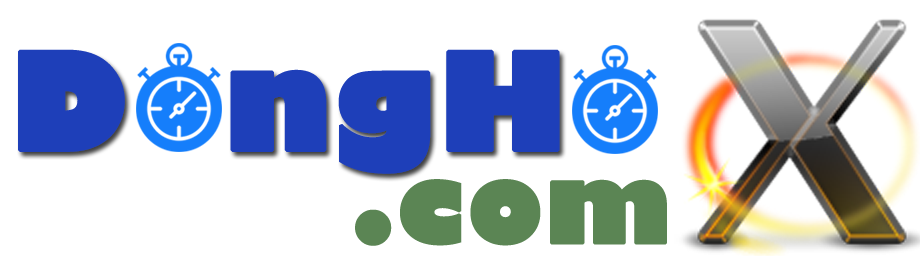
<style>
.page{position:relative;width:920px;height:256px;background:#ffffff}
.page>*{position:absolute;margin:0}
.t1{font:132px "GillSans-UltraBold";color:#1e3fb9;font-weight:bold}
.t2{font:104px "GillSans-UltraBold";color:#5b8554;font-weight:bold}
</style>
<div class="page">
<p class="t1" style="left:18px;top:49px;width:542px;height:125px">D  ngH</p>
<p class="t2" style="left:355px;top:179px;width:312px;height:67px">.com</p>
</div>
